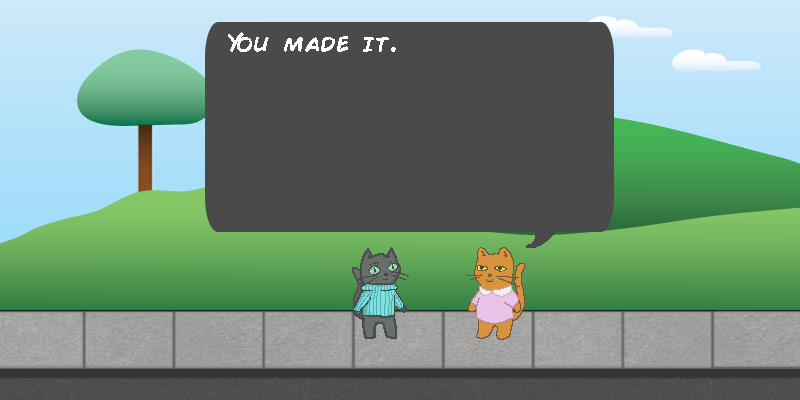
<style>
.page{position:relative;width:800px;height:400px;background:#4a4a4a}
.page>*{position:absolute;margin:0}
.t1{font:26px "ComicBook";color:#ffffff}
</style>
<div class="page">
<p class="t1" style="left:228px;top:32px;width:168px;height:20px">You made it.</p>
</div>
